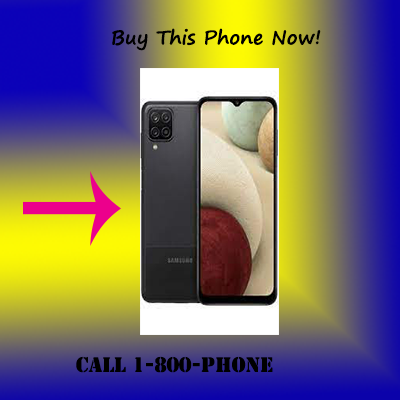
<style>
.page{position:relative;width:400px;height:400px}
.page>*{position:absolute;margin:0}
.t1{font:19.6px "SegoePrint-Bold";color:#000000}
.t2{font:19.6px "StencilStd";color:#000000}
</style>
<div class="page">
<p class="t1" style="left:112px;top:28px;width:209px;height:23px">Buy This Phone Now!</p>
<p class="t2" style="left:76px;top:356px;width:197px;height:17px">Call 1-800-Phone</p>
</div>
